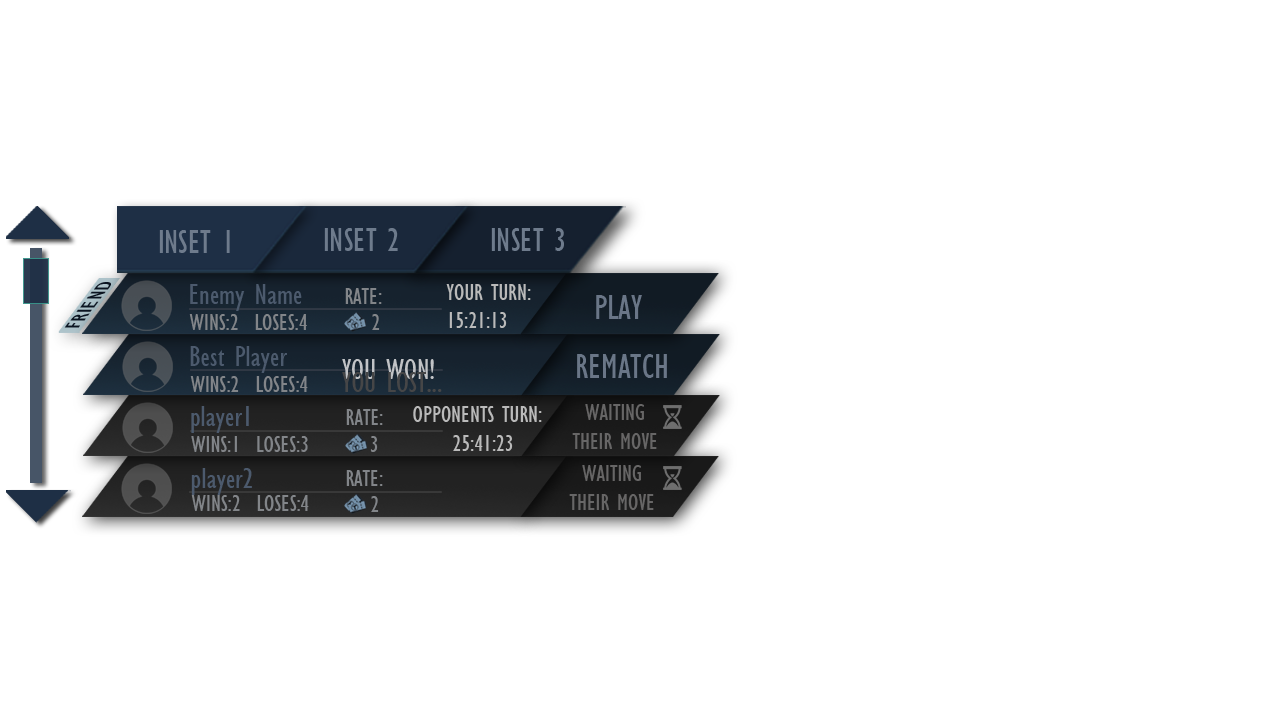
<style>
.page{position:relative;width:1280px;height:720px;background:#ffffff}
.page>*{position:absolute;margin:0}
.t1{font:34.9px "GillSansMT-Condensed";color:#6e7b8c}
.t2{font:21.1px "GillSansMT-Condensed";color:#0b1421;scale:1.38 1}
.t3{font:30px "GillSansMT-Condensed";color:#4c5a6d}
.t4{font:24px "GillSansMT-Condensed";color:#828589}
.t5{font:24px "GillSansMT-Condensed";color:#bababa}
.t6{font:36px "GillSansMT-Condensed";color:#6a7687}
.t7{font:30px "GillSansMT-Condensed";color:#c1c3c6}
.t8{font:24px "GillSansMT-Condensed";color:#676666}
</style>
<div class="page">
<p class="t1" style="left:159px;top:230px;width:71px;height:23px">INSET 1</p>
<p class="t1" style="left:324px;top:228px;width:74px;height:23px">INSET 2</p>
<p class="t1" style="left:491px;top:228px;width:73px;height:23px">INSET 3</p>
<p class="t2" style="left:64px;top:282px;width:47px;height:46px;rotate:-53deg">FRIEND</p>
<p class="t3" style="left:190px;top:284px;width:112px;height:27px">Enemy Name</p>
<p class="t4" style="left:345px;top:288px;width:37px;height:16px">RATE:</p>
<p class="t5" style="left:446px;top:284px;width:85px;height:44px">YOUR TURN:<br>15:21:13</p>
<p class="t6" style="left:596px;top:295px;width:46px;height:24px">PLAY</p>
<p class="t4" style="left:189px;top:314px;width:118px;height:16px">WINS:2  LOSES:4</p>
<p class="t4" style="left:372px;top:314px;width:8px;height:16px">2</p>
<p class="t3" style="left:190px;top:346px;width:97px;height:27px">Best Player</p>
<p class="t7" style="left:342px;top:359px;width:92px;height:20px">YOU WON!</p>
<p class="t6" style="left:577px;top:354px;width:90px;height:24px">REMATCH</p>
<p class="t4" style="left:190px;top:376px;width:118px;height:16px">WINS:2  LOSES:4</p>
<p class="t3" style="left:191px;top:406px;width:58px;height:27px">player1</p>
<p class="t4" style="left:346px;top:409px;width:37px;height:16px">RATE:</p>
<p class="t5" style="left:413px;top:406px;width:129px;height:45px">OPPONENTS TURN:<br>     25:41:23</p>
<p class="t8" style="left:572px;top:404px;width:85px;height:45px;text-align:center">WAITING<br>THEIR MOVE</p>
<p class="t4" style="left:191px;top:436px;width:117px;height:16px">WINS:1  LOSES:3</p>
<p class="t4" style="left:370px;top:436px;width:8px;height:16px">3</p>
<p class="t3" style="left:191px;top:468px;width:61px;height:27px">player2</p>
<p class="t4" style="left:346px;top:470px;width:37px;height:16px">RATE:</p>
<p class="t8" style="left:569px;top:465px;width:85px;height:45px;text-align:center">WAITING<br>THEIR MOVE</p>
<p class="t4" style="left:191px;top:495px;width:118px;height:16px">WINS:2  LOSES:4</p>
<p class="t4" style="left:371px;top:496px;width:8px;height:16px">2</p>
</div>
